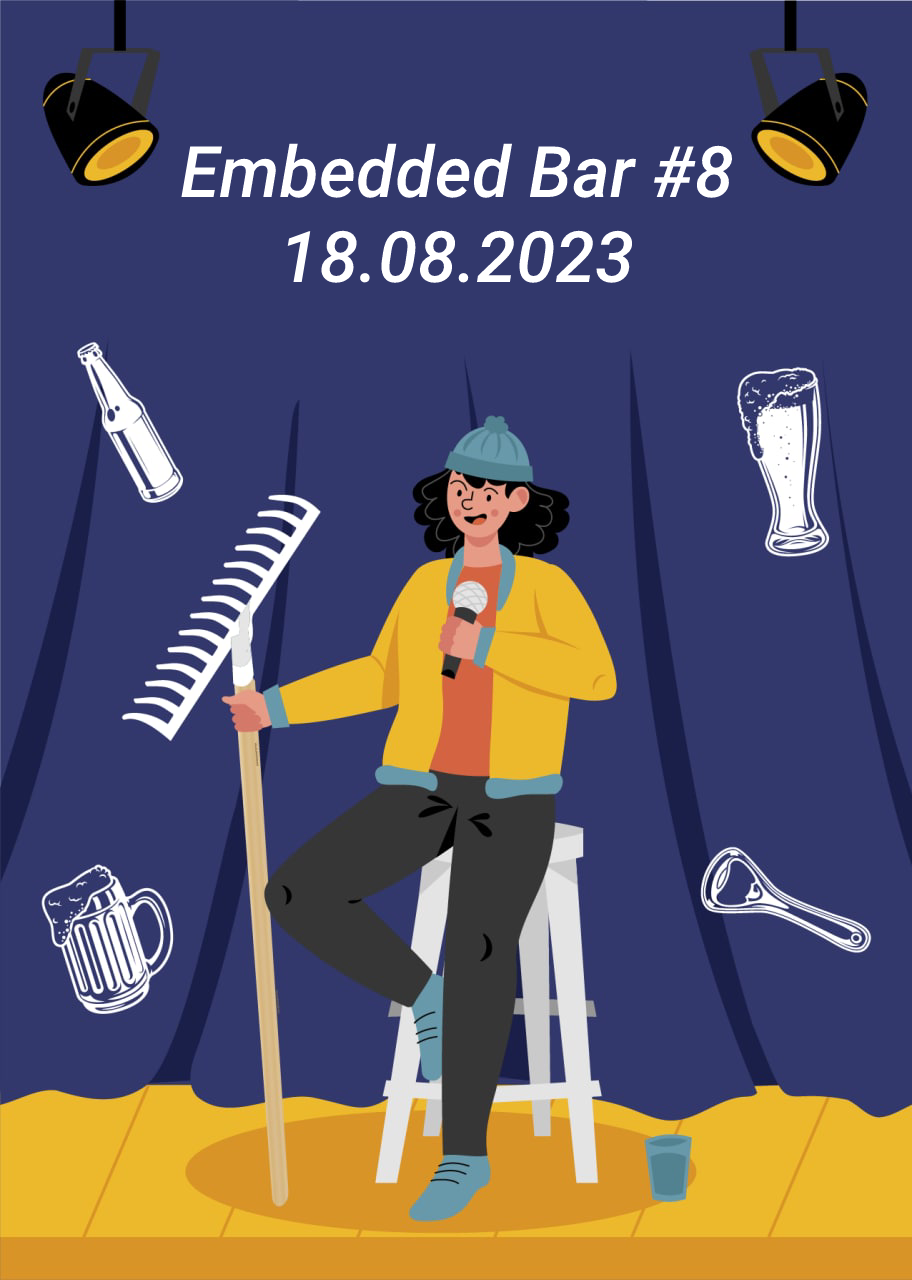
<style>
.page{position:relative;width:912px;height:1280px;background:#32386c}
.page>*{position:absolute;margin:0}
.t1{font:71px "Roboto-MediumItalic";color:#ffffff}
</style>
<div class="page">
<p class="t1" style="left:181px;top:143px;width:552px;height:140px;text-align:center">Embedded Bar #8<br>18.08.2023</p>
</div>
